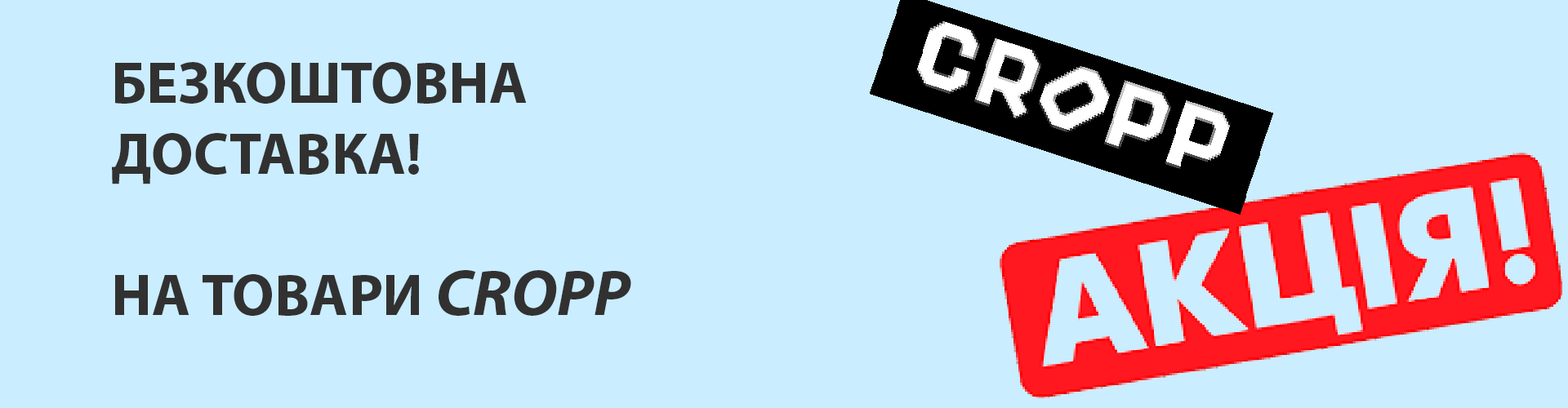
<style>
.page{position:relative;width:1568px;height:408px;background:#caedff}
.page>*{position:absolute;margin:0}
.t1{font:58.8px "MyriadPro-Bold";color:#323131}
.t2{font:65.3px "MyriadPro-BoldIt";color:#323131}
</style>
<div class="page">
<p class="t1" style="left:112px;top:62px;width:415px;height:123px">БЕЗКОШТОВНА ДОСТАВКА!</p>
<p class="t1" style="left:115px;top:270px;width:516px;height:46px">НА ТОВАРИ <span class="t2">CROPP</span></p>
</div>
